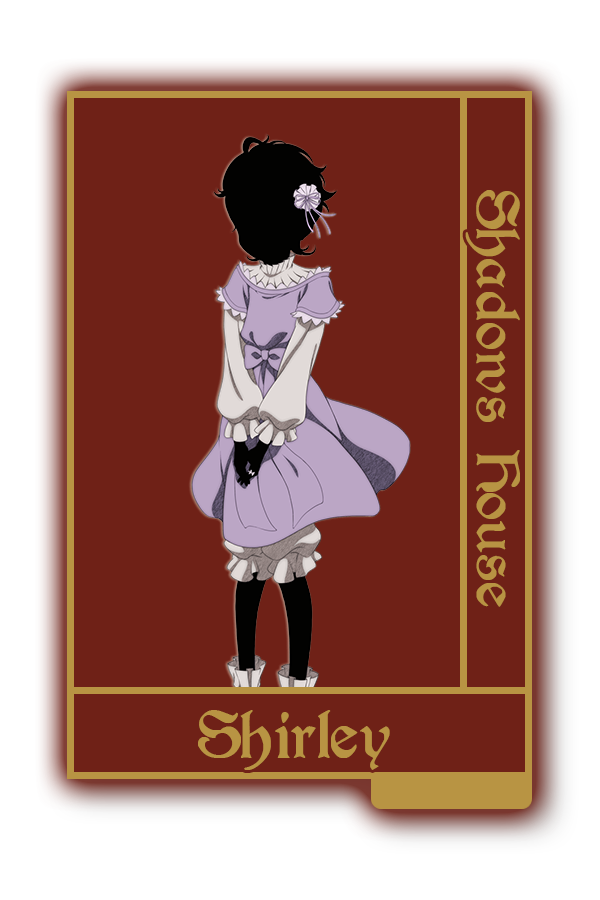
<style>
.page{position:relative;width:600px;height:900px;background:#6f2117}
.page>*{position:absolute;margin:0}
.t1{font:67.9px "Augusta-Regular";color:#b89443}
.t2{font:75px "Augusta-Regular";color:#b89443}
</style>
<div class="page">
<p class="t1" style="left:465px;top:190px;width:55px;height:417px;rotate:90deg">Shadows House</p>
<p class="t2" style="left:198px;top:710px;width:192px;height:60px">Shirley</p>
</div>
